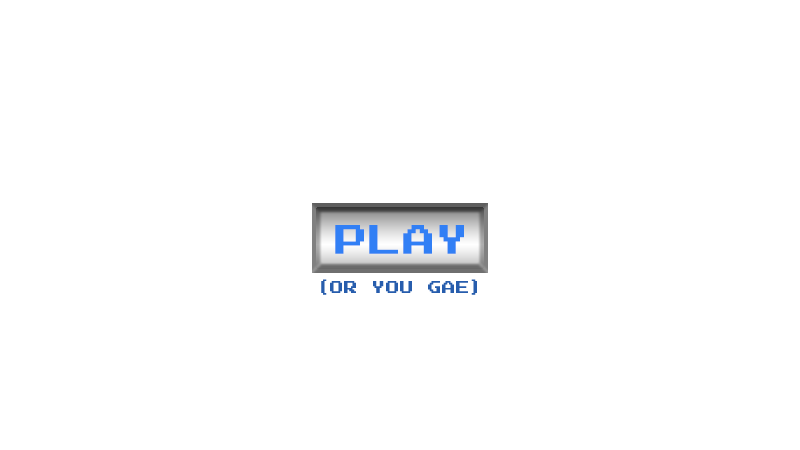
<style>
.page{position:relative;width:800px;height:450px;background:#ffffff}
.page>*{position:absolute;margin:0}
.t1{font:41px "JoystixMonospace-Regular";color:#3180f5}
.t2{font:17px "JoystixMonospace-Regular";color:#275dae}
</style>
<div class="page">
<p class="t1" style="left:335px;top:225px;width:129px;height:29px">PLAY</p>
<p class="t2" style="left:321px;top:279px;width:156px;height:16px">(or you gae)</p>
</div>
